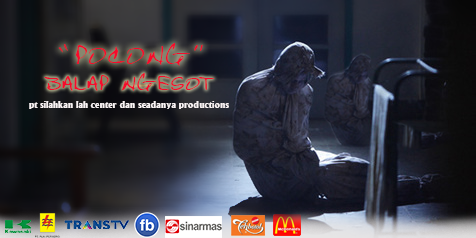
<style>
.page{position:relative;width:476px;height:238px}
.page>*{position:absolute;margin:0}
.t1{font:25px "Bert";color:#f60b2c}
.t2{font:19.7px "Bert";color:#f60b2c}
.t3{font:9.1px "AnkuraSSi";color:#f9f3f4}
</style>
<div class="page">
<p class="t1" style="left:58px;top:43px;width:145px;height:23px">“POCONG”</p>
<p class="t2" style="left:44px;top:73px;width:171px;height:18px">BALAP NGESOT</p>
<p class="t3" style="left:29px;top:101px;width:200px;height:8px">pt silahkan lah center dan seadanya productions</p>
</div>
